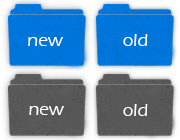
<style>
.page{position:relative;width:180px;height:140px}
.page>*{position:absolute;margin:0}
.t1{font:18px "ErasITC-Medium";color:#ffffff}
</style>
<div class="page">
<p class="t1" style="left:28px;top:37px;width:35px;height:9px">new</p>
<p class="t1" style="left:123px;top:34px;width:25px;height:12px">old</p>
<p class="t1" style="left:29px;top:106px;width:35px;height:9px">new</p>
<p class="t1" style="left:123px;top:104px;width:25px;height:12px">old</p>
</div>
